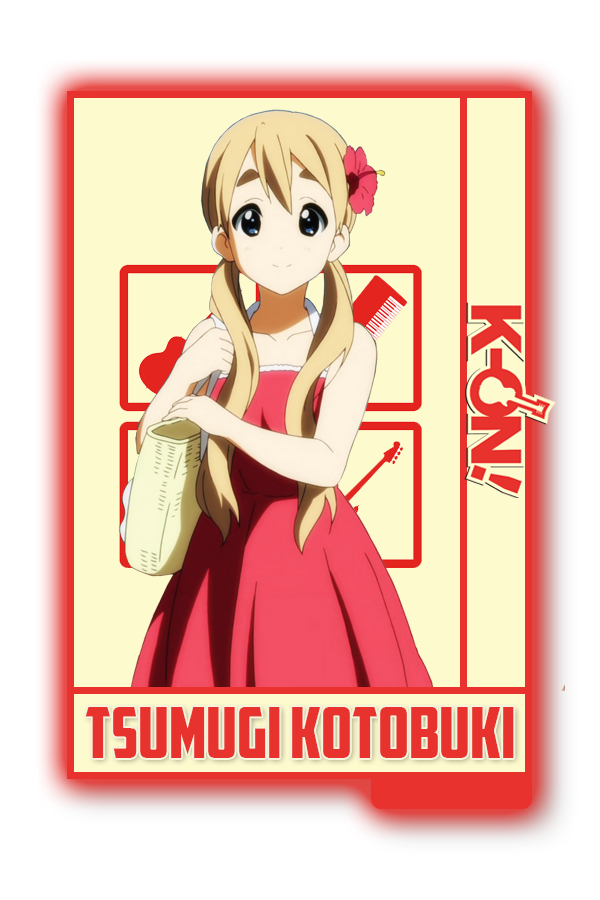
<style>
.page{position:relative;width:600px;height:900px;background:#fdfacd}
.page>*{position:absolute;margin:0}
.t1{font:70.8px "AmericanCaptain";color:#e7322e}
</style>
<div class="page">
<p class="t1" style="left:85px;top:707px;width:429px;height:51px">tsumugi kotobuki</p>
</div>
